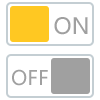
<style>
.page{position:relative;width:100px;height:100px;background:#ffffff}
.page>*{position:absolute;margin:0}
.t1{font:22px "MicrosoftYaHei";color:#a0a0a0}
.t2{font:20px "MicrosoftYaHei";color:#a0a0a0}
</style>
<div class="page">
<p class="t1" style="left:54px;top:17px;width:34px;height:18px">ON</p>
<p class="t2" style="left:12px;top:69px;width:36px;height:17px">OFF</p>
</div>
